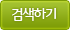
<style>
.page{position:relative;width:70px;height:30px}
.page>*{position:absolute;margin:0}
.t1{font:14px "MoebiusKorea-Regular";letter-spacing:-0.1em;color:#ffffff;text-transform:uppercase}
</style>
<div class="page">
<p class="t1" style="left:12px;top:8px;width:44px;height:13px">검색하기</p>
</div>
